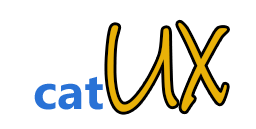
<style>
.page{position:relative;width:256px;height:129px;background:#ffffff}
.page>*{position:absolute;margin:0}
.t1{font:125.2px "InkFree";color:#e9b108}
.t2{font:49.6px "Ebrima-Bold";color:#2972d6}
</style>
<div class="page">
<p class="t1" style="left:107px;top:22px;width:120px;height:90px">UX</p>
<p class="t2" style="left:34px;top:76px;width:69px;height:34px">cat</p>
</div>
